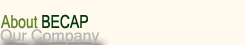
<style>
.page{position:relative;width:245px;height:45px;background:#fff9ee}
.page>*{position:absolute;margin:0}
.t1{font:18px "MicrosoftSansSerif";color:#5f8428;scale:0.78 1}
.t2{font:18px "MicrosoftSansSerif";color:#02390b;scale:0.78 1}
.t3{font:16px "MicrosoftSansSerif";color:#b4b8b5}
</style>
<div class="page">
<p class="t1" style="left:0px;top:14px;width:88px;height:15px">About <span class="t2">BECAP</span></p>
<p class="t3" style="left:0px;top:29px;width:100px;height:16px">Our Company</p>
</div>
